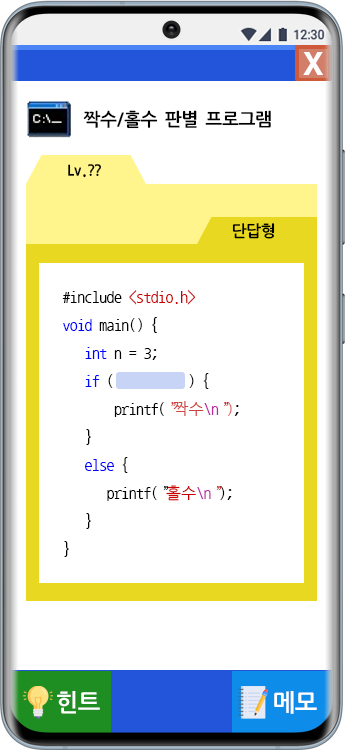
<style>
.page{position:relative;width:345px;height:750px;background:#ffffff}
.page>*{position:absolute;margin:0}
.t1{font:30px "H2gtrE";color:#ffffff}
.t2{font:18px "NanumGothicCoding-Bold";letter-spacing:-0.08em;color:#000000}
.t3{font:16px "NanumGothicCoding-Bold";letter-spacing:-0.08em;color:#000000}
.t4{font:16px "NanumGothicCoding";letter-spacing:-0.04em;color:#000000}
.t5{font:16px "NanumGothicCoding";letter-spacing:-0.04em;color:#c80000}
.t6{font:16px "NanumGothicCoding";letter-spacing:-0.04em;color:#0000ff}
.t7{font:16px "NanumGothicCoding";letter-spacing:-0.04em;color:#000fff}
.t8{font:16px "NanumGothicCoding";letter-spacing:-0.04em;color:#d04242}
.t9{font:16px "NanumGothicCoding";letter-spacing:-0.04em;color:#bb2ca5}
.t10{font:16px "NanumGothicCoding";letter-spacing:-0.04em;color:#cc2626}
.t11{font:16px "NanumGothicCoding";letter-spacing:-0.04em;color:#d55e5e}
.t12{font:24px "NanumGothicCoding-Bold";letter-spacing:-0.08em;color:#ffffff}
</style>
<div class="page">
<p class="t1" style="left:303px;top:52px;width:20px;height:23px">X</p>
<p class="t2" style="left:83px;top:110px;width:188px;height:19px">짝수/홀수 판별 프로그램</p>
<p class="t3" style="left:68px;top:164px;width:33px;height:14px">Lv.??</p>
<p class="t3" style="left:232px;top:223px;width:43px;height:16px">단답형</p>
<p class="t4" style="left:62px;top:289px;width:177px;height:268px">#include <span class="t5">&lt;stdio.h&gt;<br></span><span class="t6">void</span> main() {<br>   <span class="t6">int</span> n = 3;<br>   <span class="t7">if</span> (          ) {<br>       printf(<span class="t8">”짝수</span><span class="t9">\n</span><span class="t10">”</span><span class="t11">)</span>;<br>   }<br>  <span class="t6"> else</span> {<br>      printf(”<span class="t5">홀수</span><span class="t9">\n</span><span class="t10">”</span>);<br>   }<br>}</p>
<p class="t12" style="left:57px;top:691px;width:43px;height:23px">힌트</p>
<p class="t12" style="left:274px;top:691px;width:43px;height:23px">메모</p>
</div>
